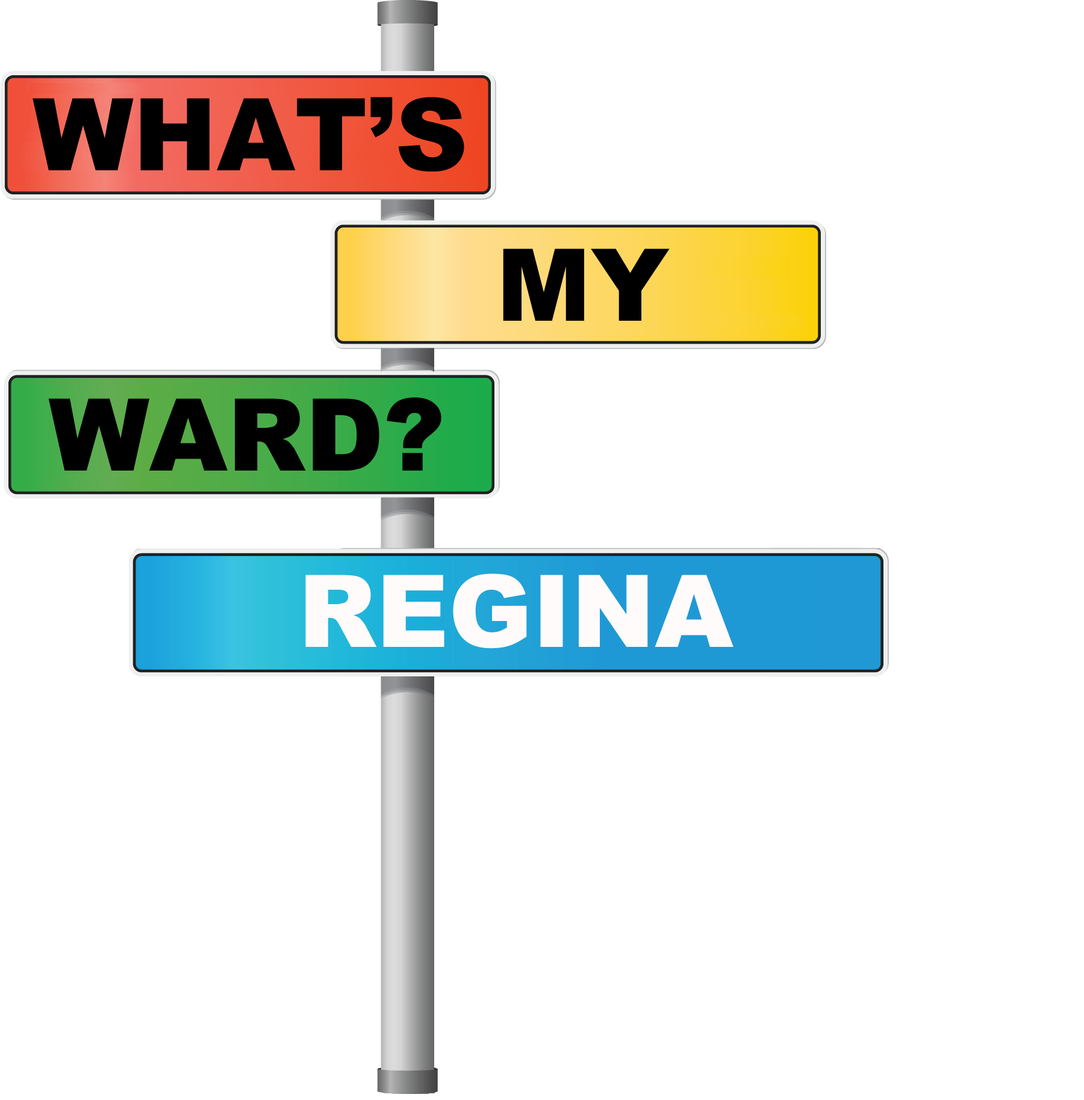
<style>
.page{position:relative;width:1084px;height:1100px;background:#ffffff}
.page>*{position:absolute;margin:0}
.t1{font:100.3px "Arial-Black";color:#000000}
.t2{font:100.3px "Arial-Black";color:#fffbfb}
</style>
<div class="page">
<p class="t1" style="left:33px;top:97px;width:431px;height:75px">WHAT’S</p>
<p class="t1" style="left:503px;top:249px;width:166px;height:72px">MY</p>
<p class="t1" style="left:48px;top:397px;width:393px;height:74px">WARD?</p>
<p class="t2" style="left:305px;top:574px;width:428px;height:75px">REGINA</p>
</div>
